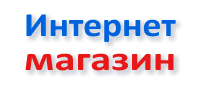
<style>
.page{position:relative;width:200px;height:90px;background:#ffffff}
.page>*{position:absolute;margin:0}
.t1{font:34px/34px "Calibri-Bold";color:#0063dd;scale:1.1 1}
.t2{font:34px/34px "Calibri-Bold";color:#e91818;scale:1.25 1}
</style>
<div class="page">
<p class="t1" style="left:25px;top:14px;width:151px;height:57px">Интернет<br><span class="t2">магазин</span></p>
</div>
